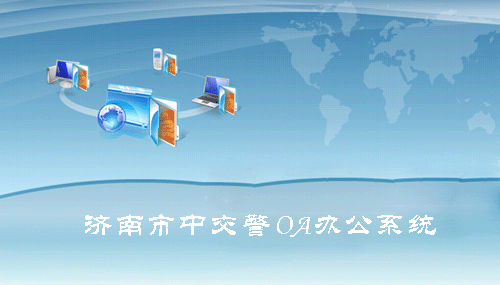
<style>
.page{position:relative;width:500px;height:285px}
.page>*{position:absolute;margin:0}
.t1{font:30px "STLiti";letter-spacing:0.05em;color:#ffffff}
</style>
<div class="page">
<p class="t1" style="left:85px;top:214px;width:351px;height:23px">济南市中交警OA办公系统</p>
</div>
